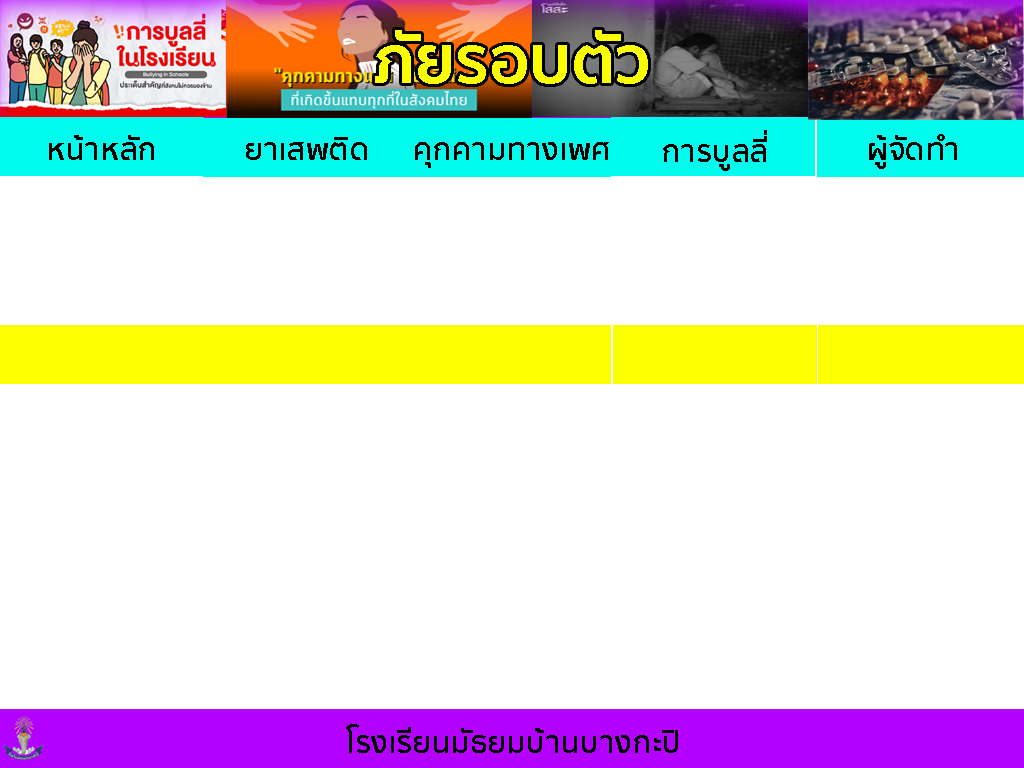
<style>
.page{position:relative;width:1024px;height:768px;background:#ffffff}
.page>*{position:absolute;margin:0}
.t1{font:66.7px "SukhumvitSet-Bold";color:#fcff00}
.t2{font:31.2px "SukhumvitSet-Bold";color:#000000}
.t3{font:31px "SukhumvitSet-Bold";color:#000000}
</style>
<div class="page">
<p class="t1" style="left:375px;top:30px;width:273px;height:54px">ภัยรอบตัว</p>
<p class="t2" style="left:49px;top:135px;width:105px;height:25px">หน้าหลัก</p>
<p class="t2" style="left:246px;top:137px;width:121px;height:23px">ยาเสพติด</p>
<p class="t3" style="left:663px;top:130px;width:104px;height:41px">การบูลลี่</p>
<p class="t3" style="left:869px;top:134px;width:88px;height:35px">ผู้จัดทำ</p>
<p class="t2" style="left:415px;top:142px;width:194px;height:26px">คุกคามทางเพศ</p>
<p class="t3" style="left:346px;top:724px;width:332px;height:29px">โรงเรียนมัธยมบ้านบางกะปิ</p>
</div>
